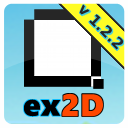
<style>
.page{position:relative;width:128px;height:128px;background:#fefefe}
.page>*{position:absolute;margin:0}
.t1{font:14.9px "BitstreamVeraSans-Bold";color:#010000}
.t2{font:31.5px "SegoeWP-Black";color:#000000}
.t3{font:31.5px "SegoeWP-Black";color:#ff4800}
</style>
<div class="page">
<p class="t1" style="left:79px;top:4px;width:45px;height:46px;rotate:45deg">v 1.2.2</p>
<p class="t2" style="left:24px;top:99px;width:37px;height:18px">ex</p>
<p class="t3" style="left:62px;top:93px;width:41px;height:24px">2D</p>
</div>
